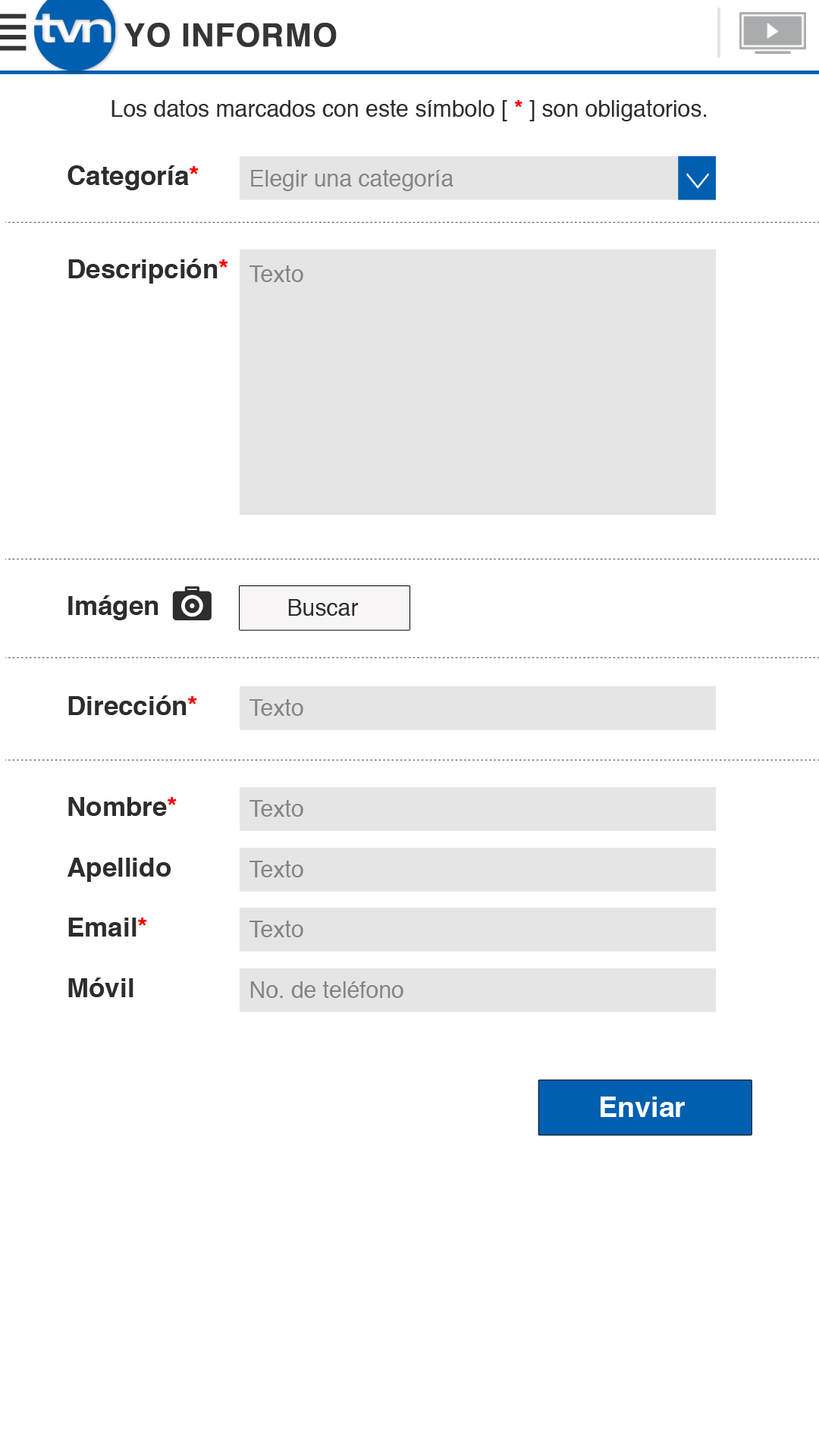
<style>
.page{position:relative;width:819px;height:1456px;background:#ffffff}
.page>*{position:absolute;margin:0}
.t1{font:32px "Helvetica-Bold";color:#353535;font-weight:bold}
.t2{font:22.8px "Helvetica";color:#2d2d2d}
.t3{font:22.8px "Helvetica-Bold";color:#ff0000}
.t4{font:26.5px "Helvetica-Bold";color:#2d2d2d}
.t5{font:26.5px "Helvetica-Bold";color:#ff0000}
.t6{font:22.8px "Helvetica";color:#858585}
.t7{font:28.6px "Helvetica-Bold";color:#fefefe}
</style>
<div class="page">
<p class="t1" style="left:124px;top:23px;width:213px;height:24px">YO INFORMO</p>
<p class="t2" style="left:111px;top:100px;width:596px;height:21px">Los datos marcados con este símbolo [ <span class="t3">*</span> ] son obligatorios.</p>
<p class="t4" style="left:67px;top:165px;width:132px;height:25px">Categoría<span class="t5">*</span></p>
<p class="t6" style="left:251px;top:170px;width:202px;height:21px">Elegir una categoría</p>
<p class="t4" style="left:68px;top:259px;width:160px;height:25px">Descripción<span class="t5">*</span></p>
<p class="t6" style="left:249px;top:265px;width:54px;height:17px">Texto</p>
<p class="t4" style="left:68px;top:595px;width:90px;height:25px">Imágen</p>
<p class="t2" style="left:288px;top:599px;width:71px;height:17px">Buscar</p>
<p class="t4" style="left:68px;top:695px;width:129px;height:20px">Dirección<span class="t5">*</span></p>
<p class="t6" style="left:249px;top:699px;width:54px;height:17px">Texto</p>
<p class="t4" style="left:68px;top:797px;width:109px;height:19px">Nombre<span class="t5">*</span></p>
<p class="t6" style="left:249px;top:800px;width:54px;height:17px">Texto</p>
<p class="t4" style="left:67px;top:858px;width:104px;height:24px">Apellido</p>
<p class="t6" style="left:249px;top:861px;width:54px;height:16px">Texto</p>
<p class="t4" style="left:68px;top:918px;width:79px;height:19px">Email<span class="t5">*</span></p>
<p class="t6" style="left:249px;top:921px;width:54px;height:16px">Texto</p>
<p class="t4" style="left:68px;top:977px;width:65px;height:20px">Móvil</p>
<p class="t6" style="left:250px;top:981px;width:153px;height:17px">No. de teléfono</p>
<p class="t7" style="left:601px;top:1097px;width:84px;height:20px">Enviar</p>
</div>
